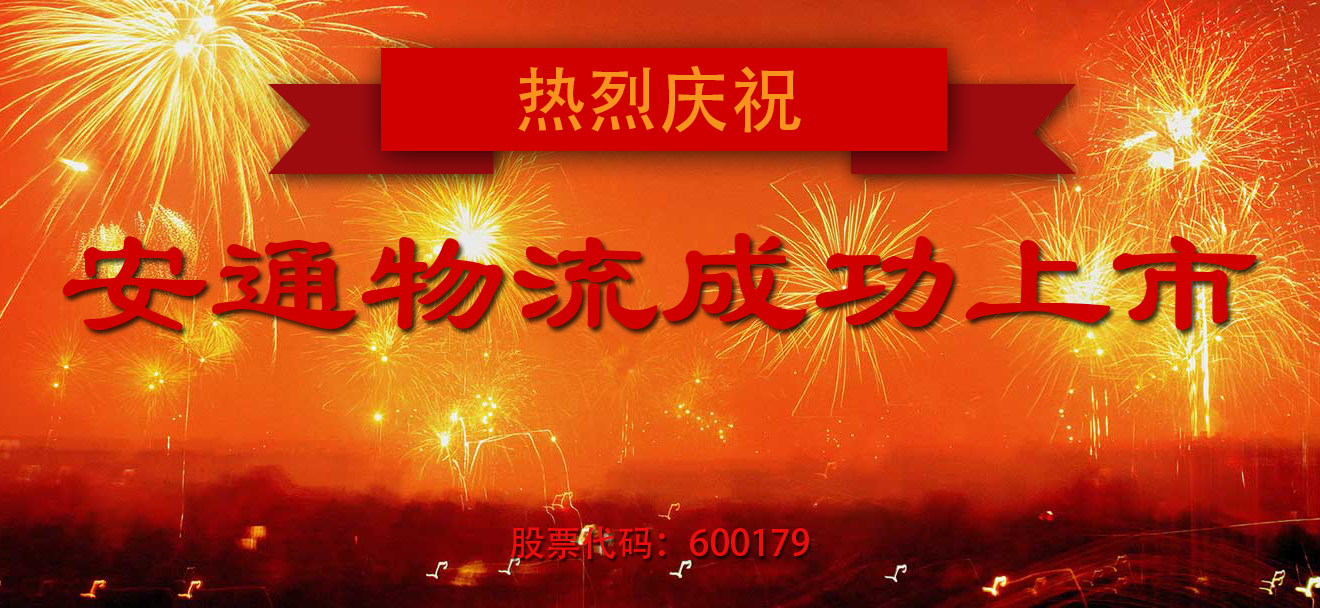
<style>
.page{position:relative;width:1320px;height:608px}
.page>*{position:absolute;margin:0}
.t1{font:72px "AdobeHeitiStd-Regular";color:#f7941d}
.t2{font:150px "STBaoli-SC-Regular";color:#d10000}
.t3{font:36px "AdobeHeitiStd-Regular";color:#ef0e0e}
</style>
<div class="page">
<p class="t1" style="left:518px;top:66px;width:283px;height:67px">热烈庆祝</p>
<p class="t2" style="left:62px;top:232px;width:1195px;height:98px">安通物流成功上市</p>
<p class="t3" style="left:510px;top:526px;width:299px;height:33px">股票代码：600179</p>
</div>
